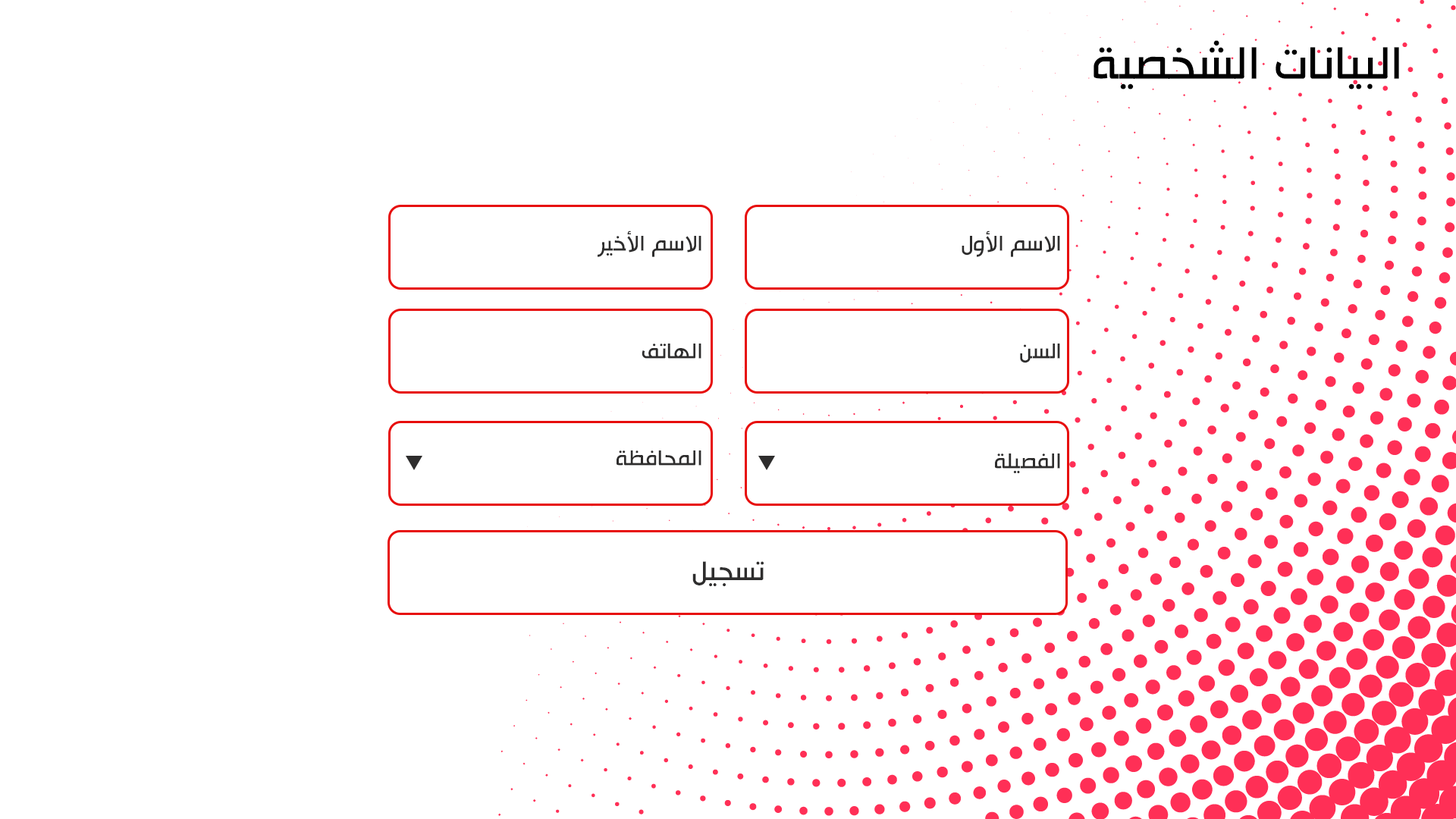
<style>
.page{position:relative;width:1456px;height:819px;background:#ffffff}
.page>*{position:absolute;margin:0}
.t1{font:53.7px "HacenTunisiaLt";color:#000000}
.t2{font:25.3px "HacenTunisiaLt";color:#2e2d2d}
.t3{font:31.6px "HacenTunisiaLt";color:#2e2d2d}
</style>
<div class="page">
<p class="t1" style="left:1094px;top:40px;width:305px;height:49px">البيانات الشخصية</p>
<p class="t2" style="left:598px;top:231px;width:103px;height:26px">الاسم الأخير</p>
<p class="t2" style="left:962px;top:231px;width:98px;height:26px">الاسم الأول</p>
<p class="t2" style="left:642px;top:344px;width:59px;height:15px">الهاتف</p>
<p class="t2" style="left:1020px;top:344px;width:40px;height:19px">السن</p>
<p class="t2" style="left:617px;top:450px;width:84px;height:16px">المحافظة</p>
<p class="t2" style="left:995px;top:453px;width:65px;height:20px">الفصيلة</p>
<p class="t3" style="left:692px;top:561px;width:72px;height:25px">تسجيل</p>
</div>
